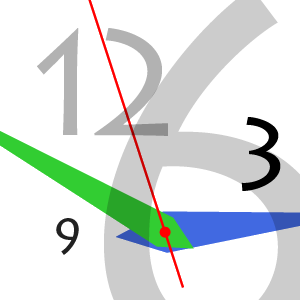
<style>
.page{position:relative;width:300px;height:300px;background:#ffffff}
.page>*{position:absolute;margin:0}
.t1{font:150px "LithosPro-Regular";color:#b2b2b2}
.t2{font:100px "LithosPro-Regular";color:#000000}
.t3{font:50px "LithosPro-Regular";color:#212121}
</style>
<div class="page">
<p class="t1" style="left:37px;top:28px;width:42px;height:107px">1</p>
<p class="t1" style="left:94px;top:28px;width:74px;height:108px">2</p>
<p class="t2" style="left:241px;top:117px;width:40px;height:74px">3</p>
<p class="t3" style="left:56px;top:218px;width:23px;height:37px">9</p>
</div>
